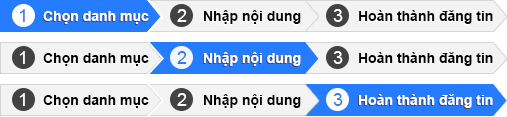
<style>
.page{position:relative;width:507px;height:117px;background:#f3f3f3}
.page>*{position:absolute;margin:0}
.t1{font:18px "ArialMT";color:#3b7ce1}
.t2{font:14px "Arial-BoldMT";color:#ffffff}
.t3{font:18px "ArialMT";color:#ffffff}
.t4{font:14px "Arial-BoldMT";color:#060606}
.t5{font:14px "Arial-BoldMT";color:#000000}
</style>
<div class="page">
<p class="t1" style="left:19px;top:9px;width:6px;height:13px">1</p>
<p class="t2" style="left:43px;top:11px;width:106px;height:13px">Chọn danh mục</p>
<p class="t3" style="left:177px;top:9px;width:10px;height:13px">2</p>
<p class="t4" style="left:203px;top:10px;width:98px;height:14px">Nhập nội dung</p>
<p class="t3" style="left:333px;top:9px;width:10px;height:13px">3</p>
<p class="t4" style="left:359px;top:10px;width:134px;height:14px">Hoàn thành đăng tin</p>
<p class="t3" style="left:19px;top:51px;width:6px;height:13px">1</p>
<p class="t5" style="left:43px;top:53px;width:106px;height:13px">Chọn danh mục</p>
<p class="t1" style="left:177px;top:51px;width:10px;height:13px">2</p>
<p class="t2" style="left:203px;top:52px;width:98px;height:14px">Nhập nội dung</p>
<p class="t3" style="left:333px;top:51px;width:10px;height:13px">3</p>
<p class="t5" style="left:359px;top:52px;width:134px;height:14px">Hoàn thành đăng tin</p>
<p class="t3" style="left:19px;top:93px;width:6px;height:13px">1</p>
<p class="t5" style="left:43px;top:95px;width:106px;height:13px">Chọn danh mục</p>
<p class="t3" style="left:177px;top:93px;width:10px;height:13px">2</p>
<p class="t4" style="left:203px;top:94px;width:98px;height:14px">Nhập nội dung</p>
<p class="t1" style="left:333px;top:93px;width:10px;height:13px">3</p>
<p class="t2" style="left:359px;top:94px;width:134px;height:14px">Hoàn thành đăng tin</p>
</div>
